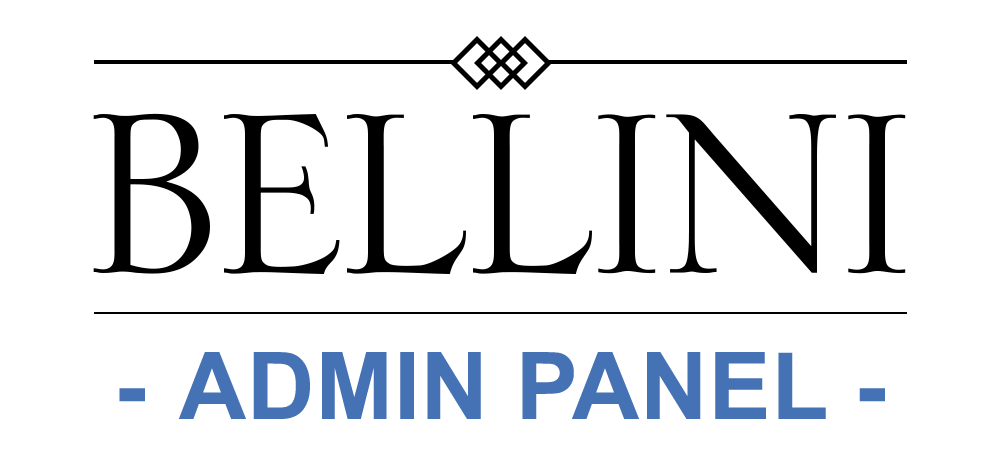
<style>
.page{position:relative;width:1000px;height:454px;background:#ffffff}
.page>*{position:absolute;margin:0}
.t1{font:93.2px "Arial-BoldMT";letter-spacing:0.01em;color:#4572b4}
</style>
<div class="page">
<p class="t1" style="left:119px;top:352px;width:766px;height:67px">ADMIN PANEL -</p>
</div>
